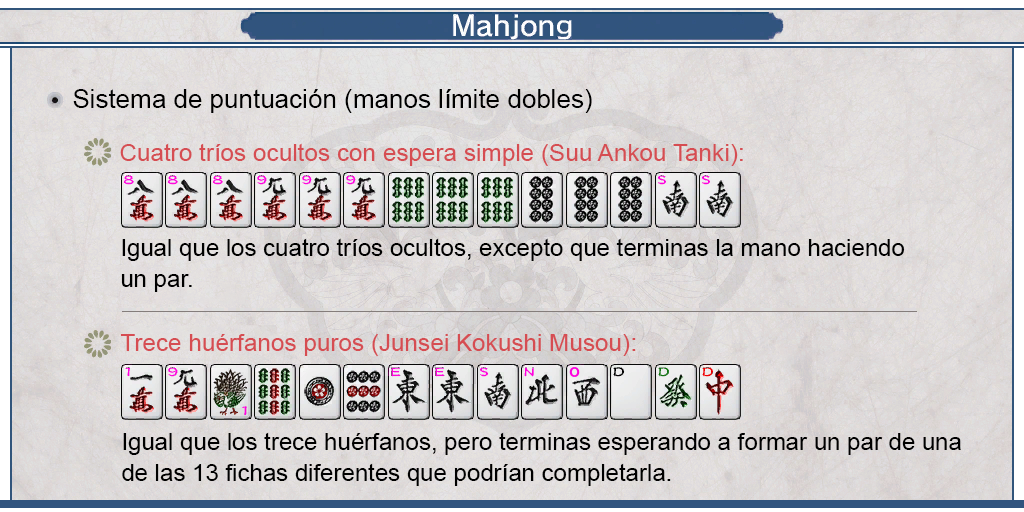
<style>
.page{position:relative;width:1024px;height:512px}
.page>*{position:absolute;margin:0}
.t1{font:26px "ArialMT";color:#000000}
.t2{font:24px "ArialMT";color:#d64d52}
.t3{font:24px/31px "ArialMT";color:#000000}
</style>
<div class="page">
<p class="t1" style="left:73px;top:89px;width:519px;height:24px">Sistema de puntuación (manos límite dobles)</p>
<p class="t2" style="left:120px;top:143px;width:623px;height:23px">Cuatro tríos ocultos con espera simple (Suu Ankou Tanki):</p>
<p class="t3" style="left:121px;top:238px;width:784px;height:54px;text-align:justify">Igual que los cuatro tríos ocultos, excepto que terminas la mano haciendo <br>un par.</p>
<p class="t2" style="left:120px;top:334px;width:516px;height:22px">Trece huérfanos puros (Junsei Kokushi Musou):</p>
<p class="t3" style="left:122px;top:432px;width:839px;height:54px;text-align:justify">Igual que los trece huérfanos, pero terminas esperando a formar un par de una <br>de las 13 fichas diferentes que podrían completarla.</p>
</div>
